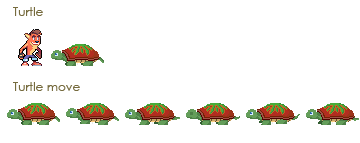
<style>
.page{position:relative;width:360px;height:143px;background:#ffffff}
.page>*{position:absolute;margin:0}
.t1{font:12px "CenturyGothic";color:#766b3e}
</style>
<div class="page">
<p class="t1" style="left:13px;top:7px;width:30px;height:9px">Turtle</p>
<p class="t1" style="left:13px;top:82px;width:67px;height:9px">Turtle move</p>
</div>
